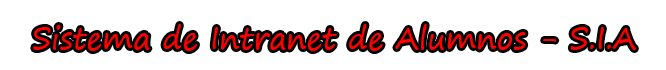
<style>
.page{position:relative;width:666px;height:70px;background:#ffffff}
.page>*{position:absolute;margin:0}
.t1{font:30px "SegoePrint";color:#ff0000}
</style>
<div class="page">
<p class="t1" style="left:33px;top:24px;width:603px;height:27px">Sistema de Intranet de Alumnos - S.I.A</p>
</div>
